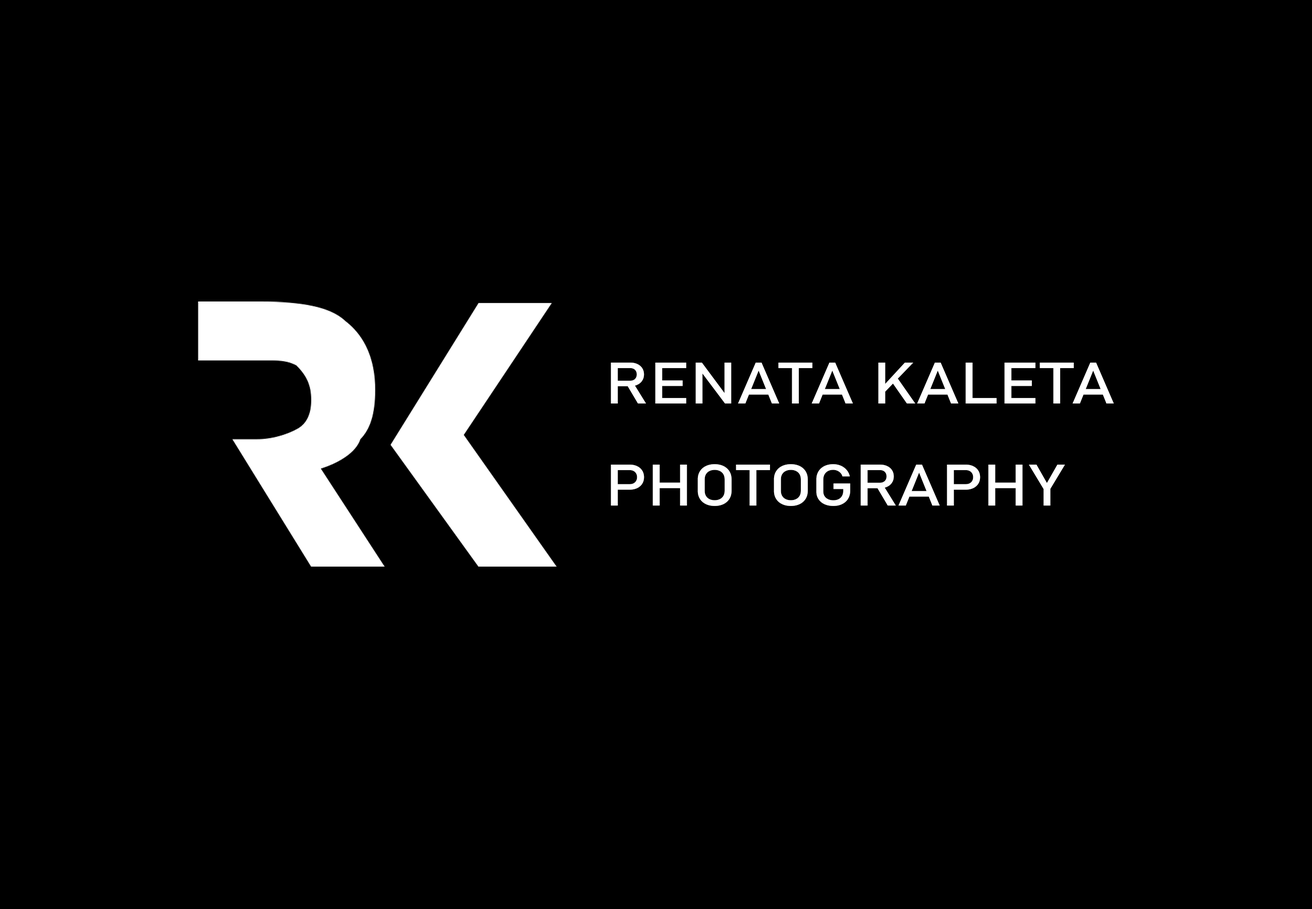
<style>
.page{position:relative;width:1312px;height:909px;background:#000000}
.page>*{position:absolute;margin:0}
.t1{font:57.6px/101.7px "Bahnschrift";color:#ffffff;text-transform:uppercase;scale:1.18 1}
</style>
<div class="page">
<p class="t1" style="left:611px;top:362px;width:504px;height:144px">Renata kaleta<br>photography</p>
</div>
